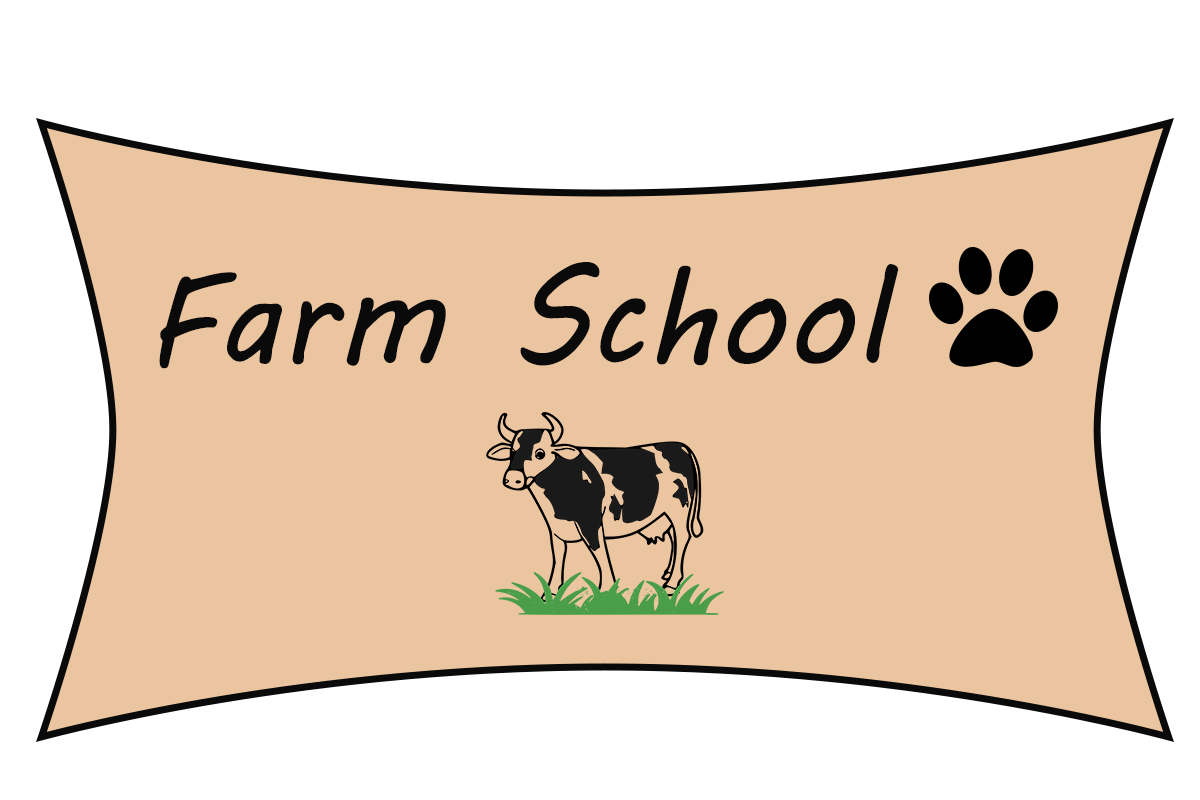
<style>
.page{position:relative;width:1200px;height:800px;background:#ebc59f}
.page>*{position:absolute;margin:0}
.t1{font:130px "MVBoli";color:#0a0a0a}
</style>
<div class="page">
<p class="t1" style="left:159px;top:262px;width:740px;height:107px">Farm School</p>
</div>
